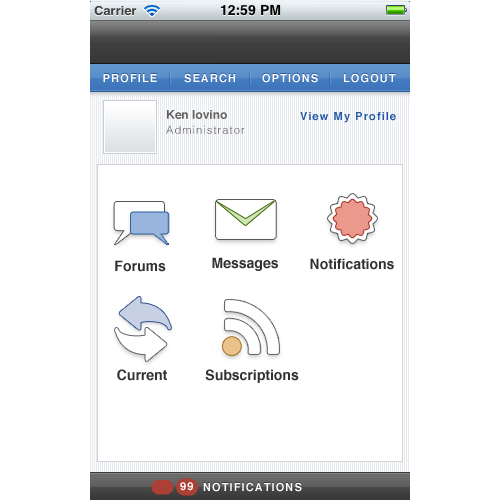
<style>
.page{position:relative;width:500px;height:500px;background:#ffffff}
.page>*{position:absolute;margin:0}
.t1{font:11px "Helvetica-Bold";letter-spacing:0.1em}
.t2{font:11px "Helvetica-Bold";letter-spacing:0.1em;color:#ffffff}
.t3{font:12px "Helvetica-Bold"}
.t4{font:12px "Helvetica-Bold";color:#616161}
.t5{font:11px "Helvetica-Bold";letter-spacing:0.1em;color:#265aa7}
.t6{font:11px "Helvetica-Light";letter-spacing:0.1em}
.t7{font:14px "Helvetica-Bold";color:#323232}
</style>
<div class="page">
<p class="t1" style="left:103px;top:72px;width:54px;height:10px">PROFILE</p>
<p class="t2" style="left:103px;top:73px;width:54px;height:10px">PROFILE</p>
<p class="t1" style="left:184px;top:72px;width:51px;height:10px">SEARCH</p>
<p class="t2" style="left:184px;top:73px;width:51px;height:10px">SEARCH</p>
<p class="t1" style="left:262px;top:72px;width:56px;height:10px">OPTIONS</p>
<p class="t2" style="left:262px;top:73px;width:56px;height:10px">OPTIONS</p>
<p class="t1" style="left:344px;top:72px;width:52px;height:10px">LOGOUT</p>
<p class="t2" style="left:344px;top:73px;width:52px;height:10px">LOGOUT</p>
<p class="t3" style="left:167px;top:109px;width:60px;height:9px">Ken Iovino</p>
<p class="t4" style="left:167px;top:110px;width:60px;height:9px">Ken Iovino</p>
<p class="t5" style="left:300px;top:112px;width:96px;height:11px">View My Profile</p>
<p class="t6" style="left:166px;top:125px;width:79px;height:9px">Administrator</p>
<p class="t7" style="left:212px;top:257px;width:66px;height:14px">Messages</p>
<p class="t7" style="left:115px;top:260px;width:51px;height:12px">Forums</p>
<p class="t7" style="left:310px;top:258px;width:84px;height:12px">Notifications</p>
<p class="t7" style="left:117px;top:369px;width:50px;height:12px">Current</p>
<p class="t7" style="left:205px;top:369px;width:94px;height:14px">Subscriptions</p>
<p class="t2" style="left:180px;top:482px;width:13px;height:9px">99</p>
<p class="t1" style="left:203px;top:481px;width:99px;height:10px">NOTIFICATIONS</p>
<p class="t2" style="left:203px;top:482px;width:99px;height:10px">NOTIFICATIONS</p>
</div>
